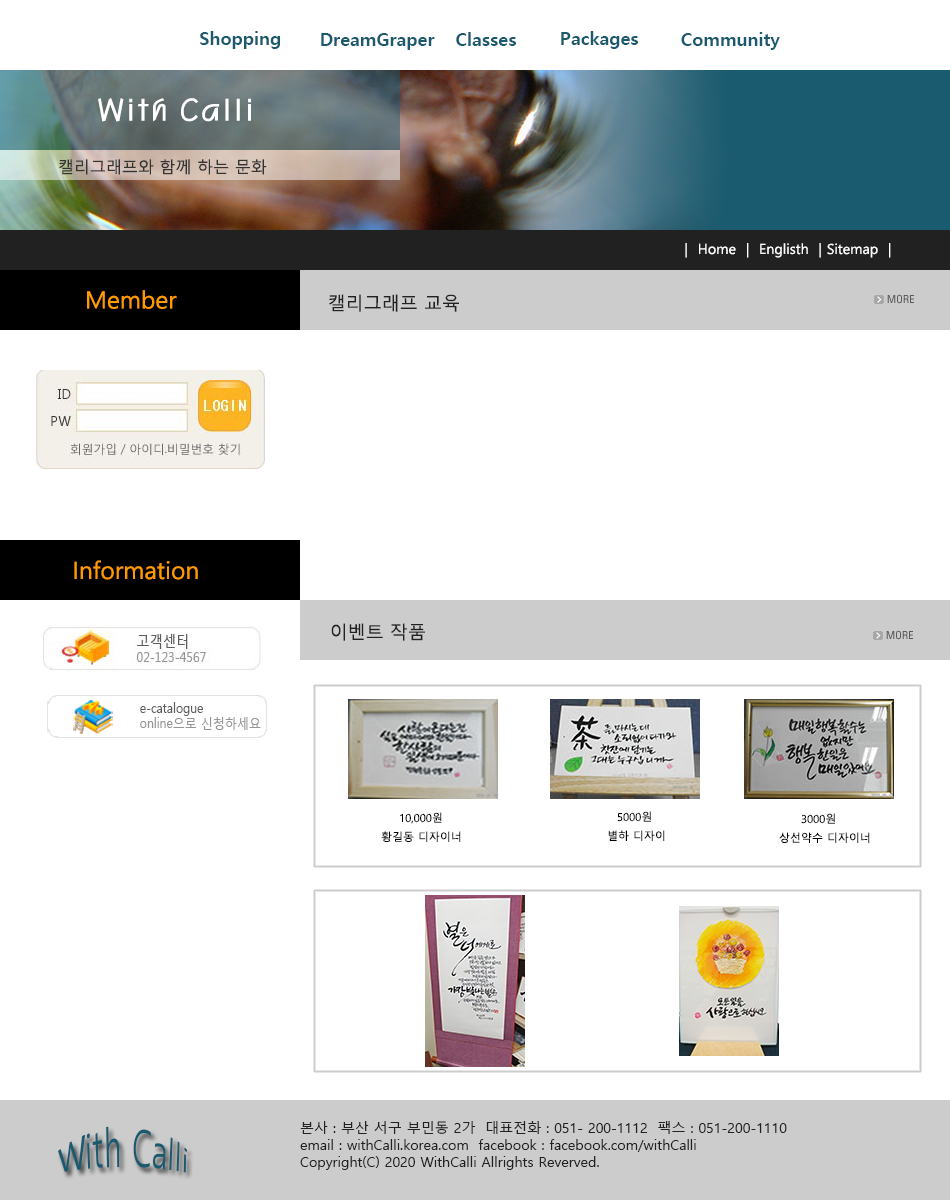
<style>
.page{position:relative;width:950px;height:1200px;background:#ffffff}
.page>*{position:absolute;margin:0}
.t1{font:18px "MalgunGothicBold";color:#1a5a6f}
.t2{font:30px "H2porM";color:#ffffff}
.t3{font:16px "MalgunGothicRegular";color:#333333}
.t4{font:14px "MalgunGothicRegular";color:#ffffff}
.t5{font:24px "MalgunGothicRegular";color:#ff9a00}
.t6{font:18px "MalgunGothicRegular";color:#212121}
.t7{font:11px "MalgunGothicRegular";color:#000000}
.t8{font:14px "MalgunGothicRegular";color:#212121}
.t9{font:30px "MalgunGothicRegular";color:#1a5a6f}
</style>
<div class="page">
<p class="t1" style="left:200px;top:31px;width:80px;height:18px">Shopping</p>
<p class="t1" style="left:321px;top:33px;width:114px;height:17px">DreamGraper</p>
<p class="t1" style="left:456px;top:32px;width:60px;height:14px">Classes</p>
<p class="t1" style="left:561px;top:31px;width:77px;height:18px">Packages</p>
<p class="t1" style="left:681px;top:32px;width:99px;height:18px">Community</p>
<p class="t2" style="left:98px;top:98px;width:153px;height:24px">With Calli</p>
<p class="t3" style="left:59px;top:159px;width:208px;height:16px">캘리그래프와 함께 하는 문화</p>
<p class="t4" style="left:685px;top:243px;width:206px;height:15px">|  Home  |  Englisth  | Sitemap  |</p>
<p class="t5" style="left:87px;top:290px;width:90px;height:19px">Member</p>
<p class="t6" style="left:329px;top:294px;width:130px;height:18px">캘리그래프 교육</p>
<p class="t5" style="left:74px;top:560px;width:124px;height:20px">Information</p>
<p class="t6" style="left:331px;top:623px;width:94px;height:18px">이벤트 작품</p>
<p class="t7" style="left:400px;top:812px;width:42px;height:12px">10,000원</p>
<p class="t7" style="left:617px;top:811px;width:34px;height:11px">5000원</p>
<p class="t7" style="left:801px;top:813px;width:34px;height:11px">3000원</p>
<p class="t7" style="left:381px;top:831px;width:80px;height:11px">황길동 디자이너</p>
<p class="t7" style="left:608px;top:830px;width:57px;height:11px">별하 디자이</p>
<p class="t7" style="left:779px;top:832px;width:91px;height:11px">상선약수 디자이너</p>
<p class="t8" style="left:300px;top:1121px;width:487px;height:49px">본사 : 부산 서구 부민동 2가  대표전화 : 051- 200-1112  팩스 : 051-200-1110<br>email : withCalli.korea.com  facebook : facebook.com/withCalli<br>Copyright(C) 2020 WithCalli Allrights Reverved.</p>
<p class="t9" style="left:58px;top:1126px;width:129px;height:47px">With Calli</p>
</div>
